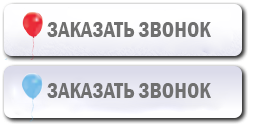
<style>
.page{position:relative;width:254px;height:128px}
.page>*{position:absolute;margin:0}
.t1{font:22px "FranklinGothic-DemiCond";color:#707070}
</style>
<div class="page">
<p class="t1" style="left:47px;top:22px;width:164px;height:15px">ЗАКАЗАТЬ ЗВОНОК</p>
<p class="t1" style="left:47px;top:83px;width:164px;height:15px">ЗАКАЗАТЬ ЗВОНОК</p>
</div>
